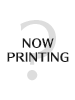
<style>
.page{position:relative;width:75px;height:100px;background:#ffffff}
.page>*{position:absolute;margin:0}
.t1{font:11px "SkipStd-B";color:#1e1e1e;font-weight:bold}
</style>
<div class="page">
<p class="t1" style="left:7px;top:38px;width:62px;height:24px;text-align:center">NOW<br>PRINTING</p>
</div>
